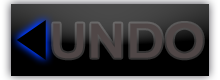
<style>
.page{position:relative;width:220px;height:80px;background:#000000}
.page>*{position:absolute;margin:0}
.t1{font:46.7px "ArialMT";color:#504747;font-weight:bold;scale:1.1 1}
</style>
<div class="page">
<p class="t1" style="left:53px;top:23px;width:150px;height:36px">UNDO</p>
</div>
